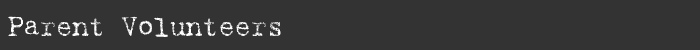
<style>
.page{position:relative;width:700px;height:50px;background:#333333}
.page>*{position:absolute;margin:0}
.t1{font:28px "Harting-Plain";letter-spacing:-0.025em;color:#ffffff}
</style>
<div class="page">
<p class="t1" style="left:8px;top:16px;width:273px;height:21px">Parent Volunteers</p>
</div>
